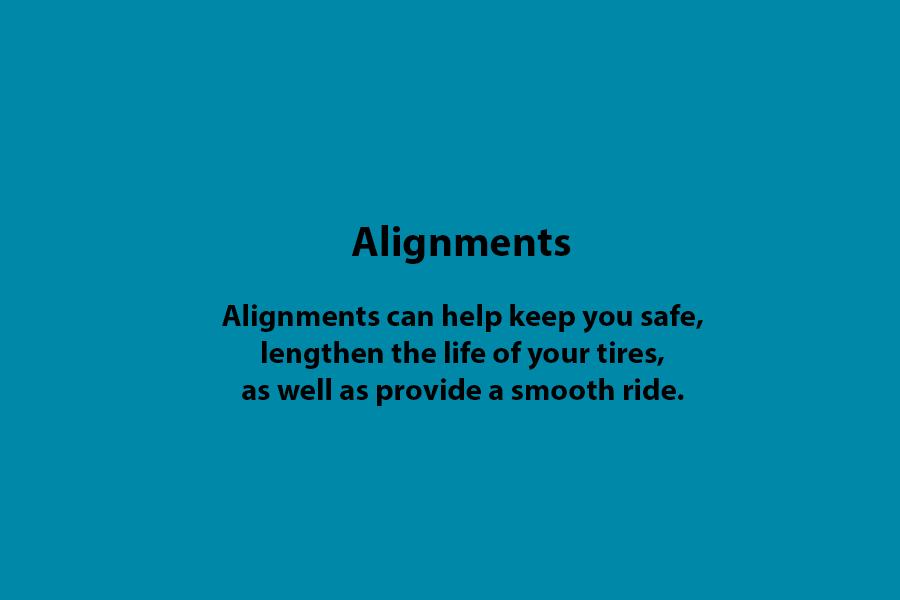
<style>
.page{position:relative;width:900px;height:600px;background:#0088a9}
.page>*{position:absolute;margin:0}
.t1{font:42.8px "MyriadPro-Bold";color:#000000}
.t2{font:30.8px "MyriadPro-Bold";color:#000000}
</style>
<div class="page">
<p class="t1" style="left:351px;top:225px;width:220px;height:39px">Alignments</p>
<p class="t2" style="left:222px;top:304px;width:481px;height:102px;text-align:center">Alignments can help keep you safe,<br>lengthen the life of your tires,<br>as well as provide a smooth ride.</p>
</div>
